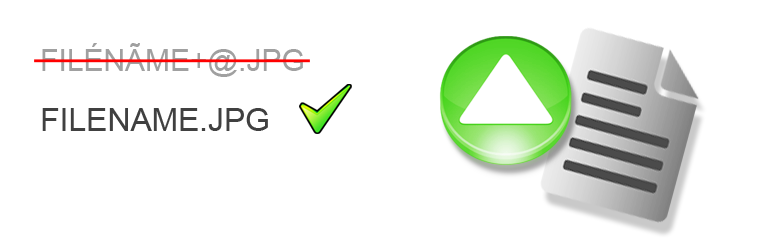
<style>
.page{position:relative;width:772px;height:250px;background:#ffffff}
.page>*{position:absolute;margin:0}
.t1{font:30px "ArialMT";color:#a0a0a0}
.t2{font:31.8px "ArialMT";color:#404040}
</style>
<div class="page">
<p class="t1" style="left:42px;top:43px;width:261px;height:34px">FILÉNÃME+@.JPG</p>
<p class="t2" style="left:42px;top:108px;width:226px;height:23px">FILENAME.JPG</p>
</div>
